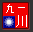
<style>
.page{position:relative;width:33px;height:32px;background:#f20000}
.page>*{position:absolute;margin:0}
.t1{font:10.4px "SimSun";color:#ffffff}
.t2{font:11.7px "SimSun";color:#ffffff}
</style>
<div class="page">
<p class="t1" style="left:6px;top:4px;width:19px;height:9px">九一</p>
<p class="t2" style="left:16px;top:15px;width:11px;height:12px">川</p>
</div>
